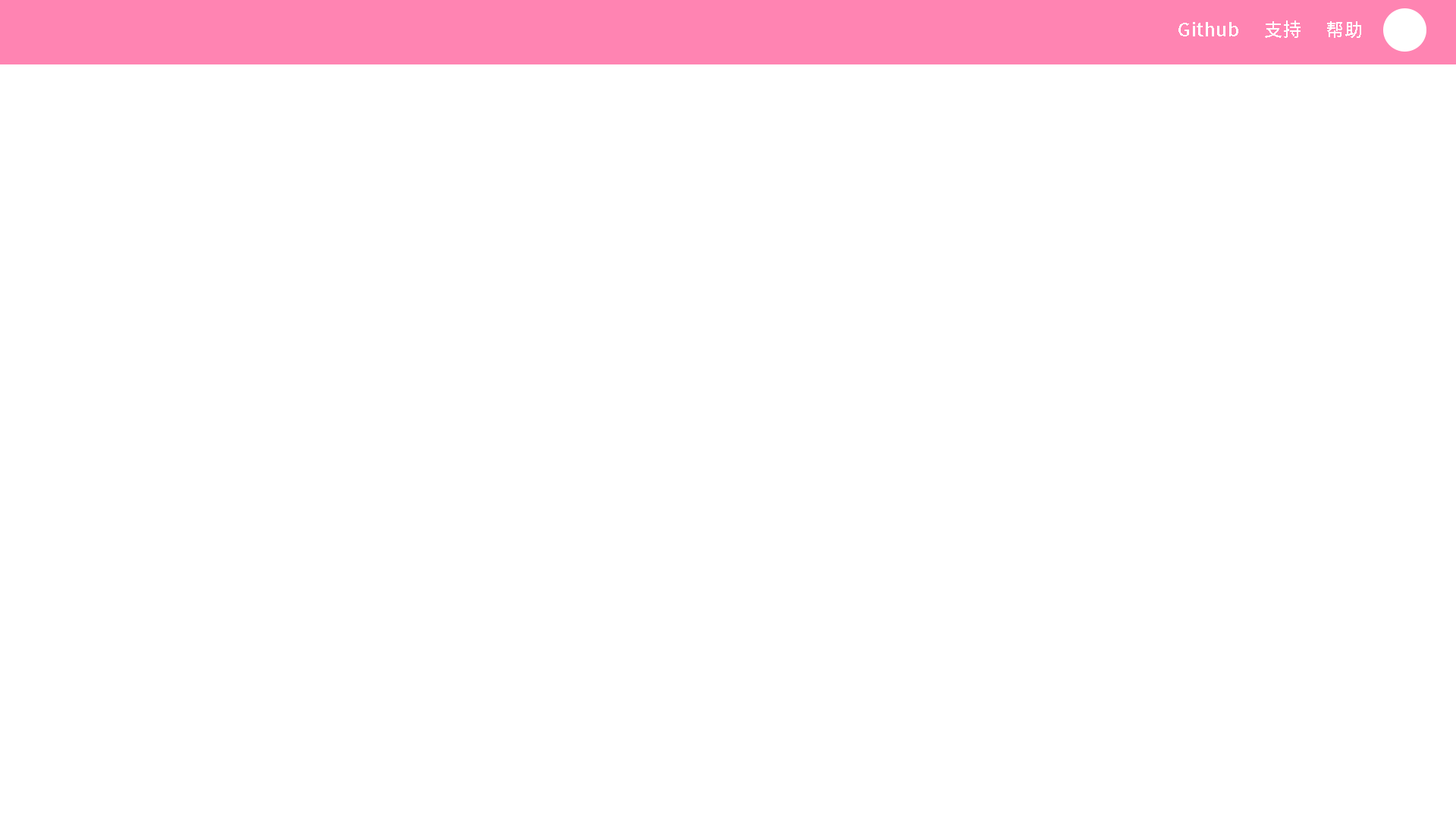
<style>
.page{position:relative;width:1456px;height:819px;background:#ffffff}
.page>*{position:absolute;margin:0}
.t1{font:18.2px "SourceHanSansCN-Medium";letter-spacing:0.02em;color:#ffffff}
</style>
<div class="page">
<p class="t1" style="left:1178px;top:22px;width:60px;height:14px">Github</p>
<p class="t1" style="left:1265px;top:20px;width:36px;height:18px">支持</p>
<p class="t1" style="left:1327px;top:21px;width:34px;height:17px">帮助</p>
</div>
